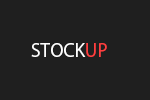
<style>
.page{position:relative;width:150px;height:100px;background:#1f1f1f}
.page>*{position:absolute;margin:0}
.t1{font:18px "KozGoPro-Regular";color:#ffffff}
.t2{font:18px "KozGoPro-Regular";color:#ff3f3f}
</style>
<div class="page">
<p class="t1" style="left:31px;top:43px;width:76px;height:14px">STOCK<span class="t2">UP</span></p>
</div>
